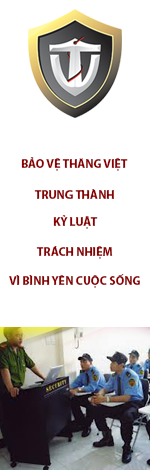
<style>
.page{position:relative;width:150px;height:470px;background:#ffffff}
.page>*{position:absolute;margin:0}
.t1{font:12px "MyriadPro-Bold";color:#8b0000}
</style>
<div class="page">
<p class="t1" style="left:21px;top:157px;width:107px;height:14px">BẢO VỆ THĂNG VIỆT</p>
<p class="t1" style="left:34px;top:189px;width:80px;height:10px">TRUNG THÀNH</p>
<p class="t1" style="left:53px;top:215px;width:45px;height:14px">KỶ LUẬT</p>
<p class="t1" style="left:36px;top:246px;width:77px;height:13px">TRÁCH NHIỆM</p>
<p class="t1" style="left:9px;top:274px;width:131px;height:14px">VÌ BÌNH YÊN CUỘC SỐNG</p>
</div>
